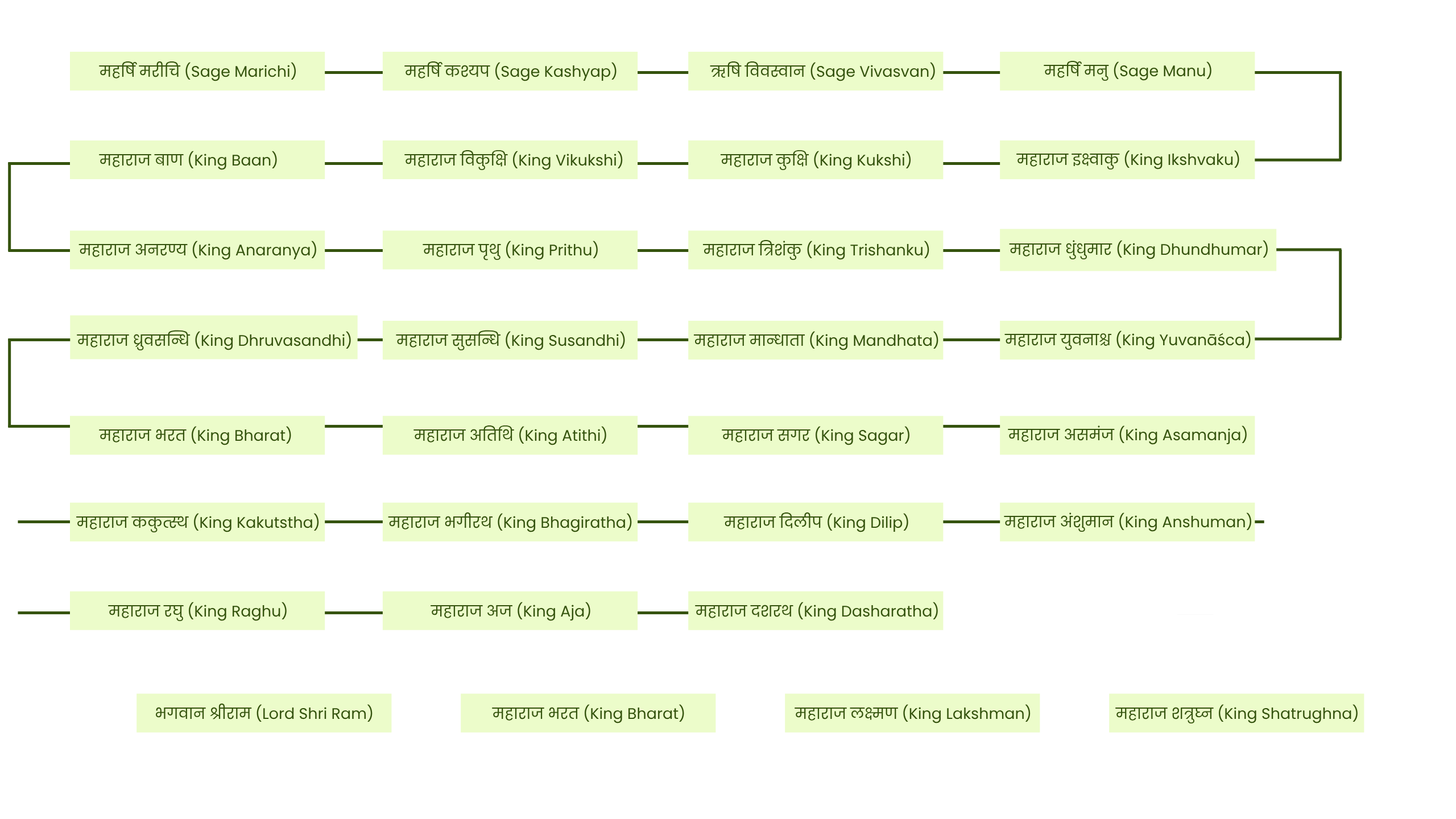
<style>
.page{position:relative;width:1456px;height:819px;background:#ffffff}
.page>*{position:absolute;margin:0}
.t1{font:15.4px "Poppins-Regular";color:#35530e}
</style>
<div class="page">
<p class="t1" style="left:99px;top:61px;width:197px;height:20px">महर्षि मरीचि (Sage Marichi)</p>
<p class="t1" style="left:404px;top:61px;width:213px;height:20px">महर्षि कश्यप (Sage Kashyap)</p>
<p class="t1" style="left:710px;top:61px;width:225px;height:20px">ऋषि विवस्वान (Sage Vivasvan)</p>
<p class="t1" style="left:1044px;top:61px;width:167px;height:20px">महर्षि मनु (Sage Manu)</p>
<p class="t1" style="left:99px;top:151px;width:178px;height:19px">महाराज बाण (King Baan)</p>
<p class="t1" style="left:404px;top:150px;width:219px;height:20px">महाराज विकुक्षि (King Vikukshi)</p>
<p class="t1" style="left:720px;top:150px;width:191px;height:20px">महाराज कुक्षि (King Kukshi)</p>
<p class="t1" style="left:1016px;top:150px;width:223px;height:19px">महाराज इक्ष्वाकु (King Ikshvaku)</p>
<p class="t1" style="left:78px;top:241px;width:238px;height:19px">महाराज अनरण्य (King Anaranya)</p>
<p class="t1" style="left:423px;top:241px;width:175px;height:19px">महाराज पृथु (King Prithu)</p>
<p class="t1" style="left:702px;top:240px;width:227px;height:20px">महाराज त्रिशंकु (King Trishanku)</p>
<p class="t1" style="left:1009px;top:240px;width:259px;height:19px">महाराज धुंधुमार (King Dhundhumar)</p>
<p class="t1" style="left:77px;top:330px;width:274px;height:20px">महाराज ध्रुवसन्धि (King Dhruvasandhi)</p>
<p class="t1" style="left:396px;top:330px;width:229px;height:20px">महाराज सुसन्धि (King Susandhi)</p>
<p class="t1" style="left:693px;top:331px;width:245px;height:19px">महाराज मान्धाता (King Mandhata)</p>
<p class="t1" style="left:1004px;top:330px;width:247px;height:20px">महाराज युवनाश्च (King Yuvanāśca)</p>
<p class="t1" style="left:99px;top:426px;width:192px;height:19px">महाराज भरत (King Bharat)</p>
<p class="t1" style="left:413px;top:425px;width:193px;height:20px">महाराज अतिथि (King Atithi)</p>
<p class="t1" style="left:722px;top:426px;width:187px;height:19px">महाराज सगर (King Sagar)</p>
<p class="t1" style="left:1008px;top:425px;width:239px;height:20px">महाराज असमंज (King Asamanja)</p>
<p class="t1" style="left:76px;top:513px;width:243px;height:19px">महाराज ककुत्स्थ (King Kakutstha)</p>
<p class="t1" style="left:388px;top:512px;width:244px;height:20px">महाराज भगीरथ (King Bhagiratha)</p>
<p class="t1" style="left:723px;top:512px;width:185px;height:20px">महाराज दिलीप (King Dilip)</p>
<p class="t1" style="left:1004px;top:512px;width:247px;height:20px">महाराज अंशुमान (King Anshuman)</p>
<p class="t1" style="left:108px;top:602px;width:179px;height:19px">महाराज रघु (King Raghu)</p>
<p class="t1" style="left:431px;top:602px;width:159px;height:19px">महाराज अज (King Aja)</p>
<p class="t1" style="left:695px;top:602px;width:243px;height:19px">महाराज दशरथ (King Dasharatha)</p>
<p class="t1" style="left:156px;top:704px;width:217px;height:18px">भगवान श्रीराम (Lord Shri Ram)</p>
<p class="t1" style="left:492px;top:704px;width:192px;height:19px">महाराज भरत (King Bharat)</p>
<p class="t1" style="left:795px;top:704px;width:236px;height:19px">महाराज लक्ष्मण (King Lakshman)</p>
<p class="t1" style="left:1115px;top:704px;width:243px;height:20px">महाराज शत्रुघ्न (King Shatrughna)</p>
</div>
